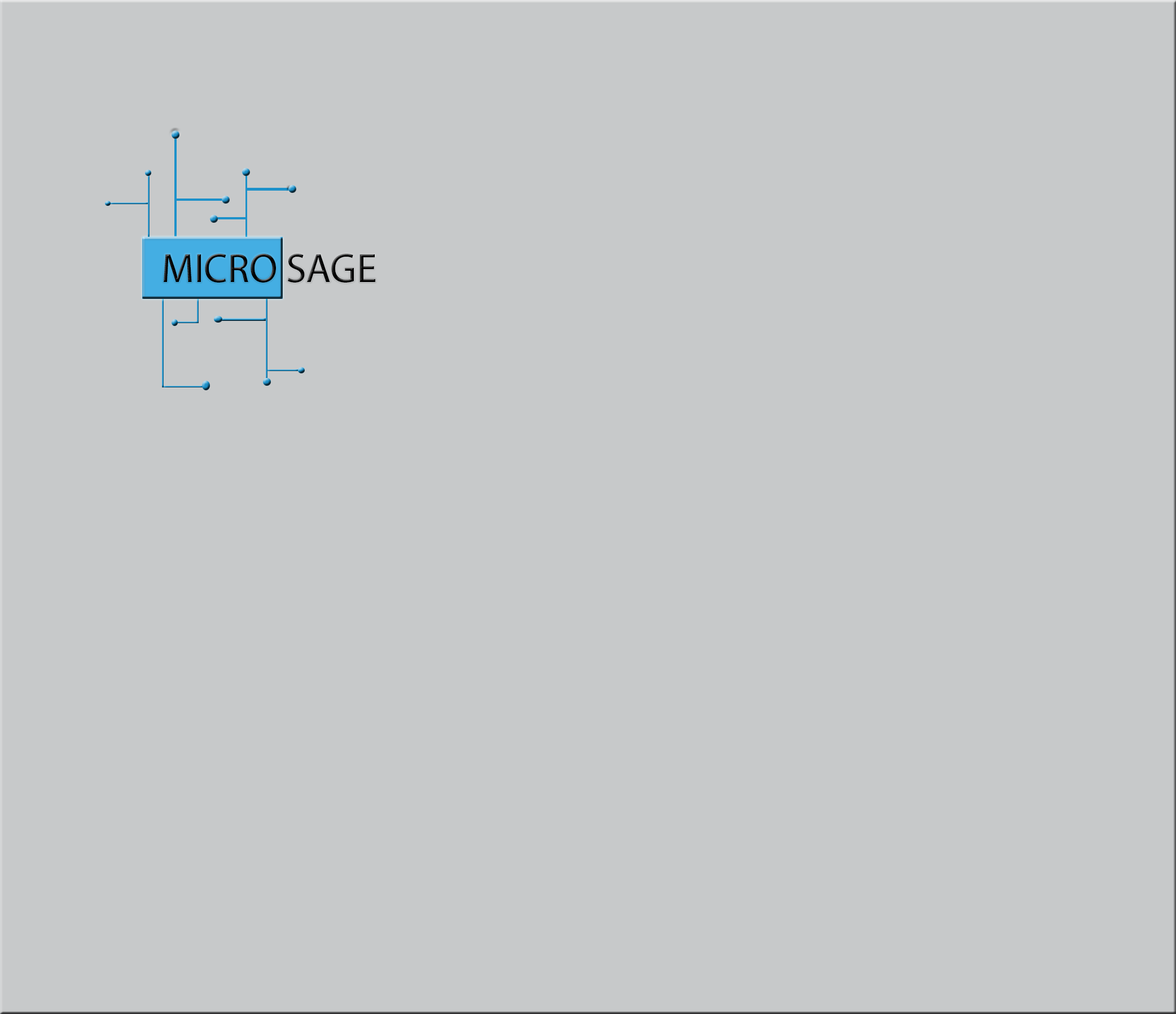
<style>
.page{position:relative;width:1176px;height:1014px;background:#c7c9ca}
.page>*{position:absolute;margin:0}
.t1{font:40.6px "MyriadHebrew-Regular";color:#000000}
</style>
<div class="page">
<p class="t1" style="left:164px;top:254px;width:211px;height:29px">MICRO SAGE</p>
</div>
